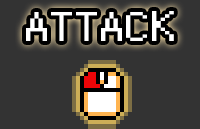
<style>
.page{position:relative;width:200px;height:129px;background:#333333}
.page>*{position:absolute;margin:0}
.t1{font:58px "Silver";color:#ffffff;scale:1.3 1}
.t2{font:60px "Silver";color:#ffffff;scale:1.3 1}
</style>
<div class="page">
<p class="t1" style="left:26px;top:11px;width:148px;height:30px">ATTAC<span class="t2">K</span></p>
</div>
